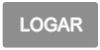
<style>
.page{position:relative;width:100px;height:50px;background:#8e8e8e}
.page>*{position:absolute;margin:0}
.t1{font:18px "ArialMT";color:#fffcfc}
</style>
<div class="page">
<p class="t1" style="left:21px;top:17px;width:62px;height:15px">LOGAR</p>
</div>
